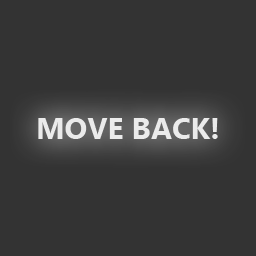
<style>
.page{position:relative;width:256px;height:256px;background:#333333}
.page>*{position:absolute;margin:0}
.t1{font:30px "MicrosoftTaiLe-Bold";color:#ebebeb}
</style>
<div class="page">
<p class="t1" style="left:38px;top:118px;width:180px;height:21px">MOVE BACK!</p>
</div>
